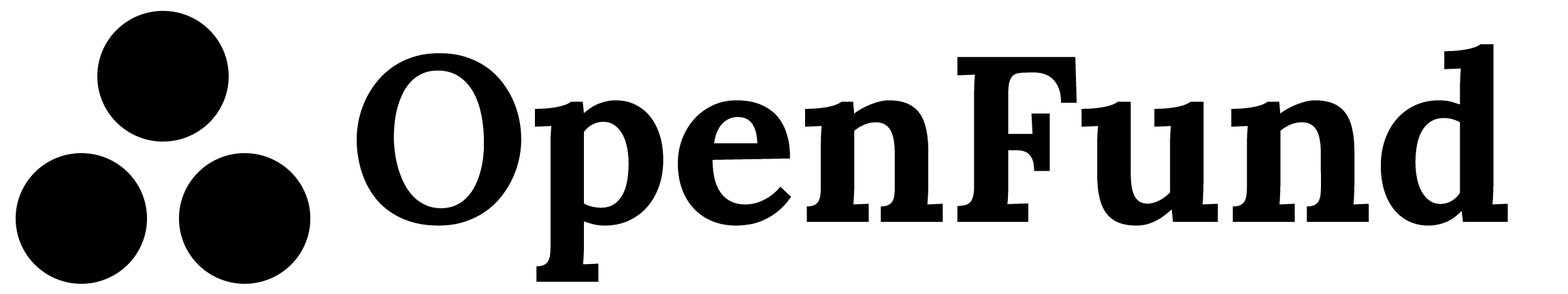
<style>
.page{position:relative;width:1568px;height:294px;background:#ffffff}
.page>*{position:absolute;margin:0}
.t1{font:235.2px "Lora-Bold";color:#000000}
</style>
<div class="page">
<p class="t1" style="left:357px;top:44px;width:1151px;height:238px">OpenFund</p>
</div>
